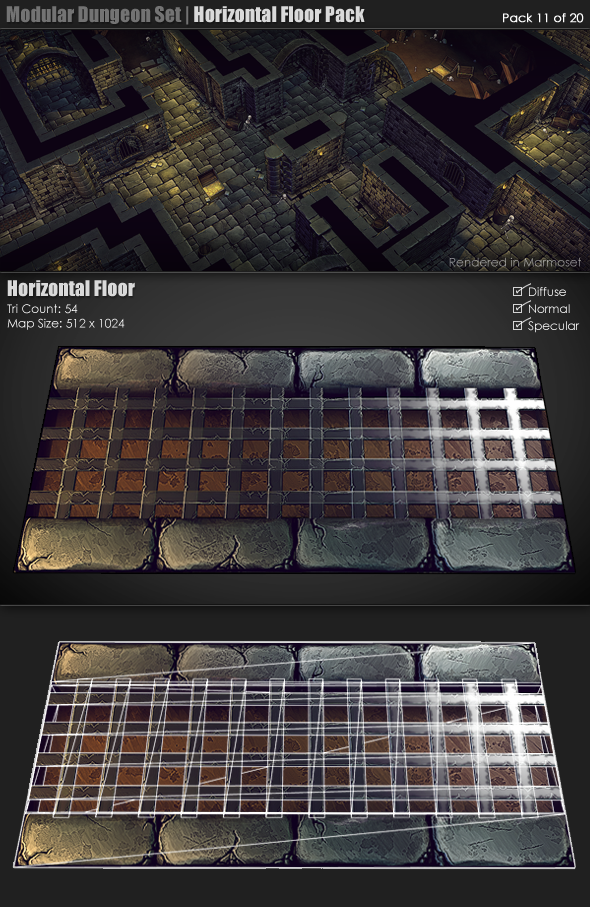
<style>
.page{position:relative;width:590px;height:907px}
.page>*{position:absolute;margin:0}
.t1{font:20px "Impact";color:#737373}
.t2{font:20px "Impact";color:#dadada}
.t3{font:12px "CenturyGothic";color:#ffffff;font-weight:bold}
.t4{font:12px "CenturyGothic";color:#a0a09c}
.t5{font:12px "CenturyGothic";color:#ffffff}
</style>
<div class="page">
<p class="t1" style="left:6px;top:6px;width:359px;height:19px">Modular Dungeon Set |<span class="t2"> Horizontal Floor Pack</span></p>
<p class="t3" style="left:503px;top:13px;width:81px;height:10px">Pack 11 of 20</p>
<p class="t4" style="left:449px;top:257px;width:132px;height:10px">Rendered in Marmoset</p>
<p class="t2" style="left:7px;top:280px;width:128px;height:17px">Horizontal Floor</p>
<p class="t5" style="left:7px;top:304px;width:118px;height:26px">Tri Count: 54 <br>Map Size: 512 x 1024</p>
</div>
